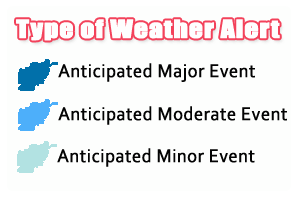
<style>
.page{position:relative;width:300px;height:200px;background:#fdfefd}
.page>*{position:absolute;margin:0}
.t1{font:23px "Impact";letter-spacing:0.01em;color:#fefefe;font-weight:bold;scale:1.2 1}
.t2{font:19.6px "Corbel";letter-spacing:0.01em;color:#030303;font-weight:bold;scale:0.93 1}
</style>
<div class="page">
<p class="t1" style="left:16px;top:19px;width:264px;height:22px">Type of Weather Alert</p>
<p class="t2" style="left:58px;top:63px;width:197px;height:19px">Anticipated Major Event</p>
<p class="t2" style="left:58px;top:106px;width:229px;height:19px">Anticipated Moderate Event</p>
<p class="t2" style="left:57px;top:148px;width:198px;height:19px">Anticipated Minor Event</p>
</div>
